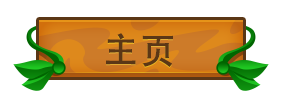
<style>
.page{position:relative;width:287px;height:103px;background:#ffffff}
.page>*{position:absolute;margin:0}
.t1{font:36px "AdobeHeitiStd-Regular";letter-spacing:0.025em;color:#5b3716}
</style>
<div class="page">
<p class="t1" style="left:106px;top:33px;width:67px;height:34px">主页</p>
</div>
